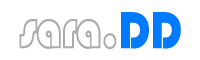
<style>
.page{position:relative;width:200px;height:60px;background:#ffffff}
.page>*{position:absolute;margin:0}
.t1{font:54px "STCaiyun";letter-spacing:0.005em;color:#ababab;scale:0.8 1}
.t2{font:54px "STHupo";letter-spacing:0.005em;color:#007aff;scale:0.8 1}
</style>
<div class="page">
<p class="t1" style="left:19px;top:12px;width:162px;height:38px">sara.<span class="t2">DD</span></p>
</div>
